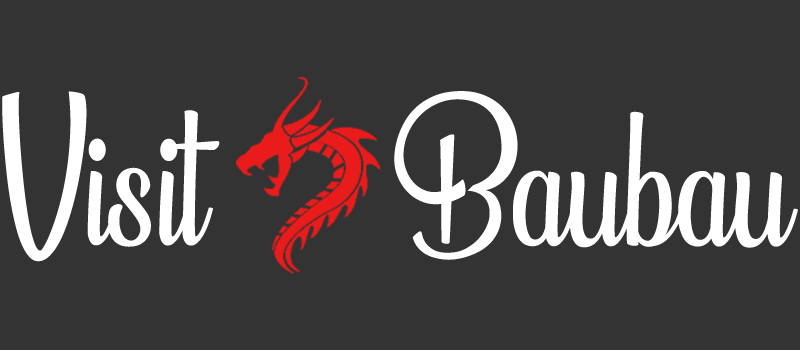
<style>
.page{position:relative;width:800px;height:350px;background:#333333}
.page>*{position:absolute;margin:0}
.t1{font:134.4px "BeautifulPeoplePersonalUse";color:#ffffff}
</style>
<div class="page">
<p class="t1" style="left:2px;top:91px;width:796px;height:171px">Visit      Baubau</p>
</div>
